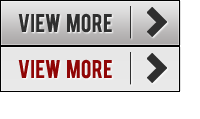
<style>
.page{position:relative;width:200px;height:119px;background:#ffffff}
.page>*{position:absolute;margin:0}
.t1{font:20px "Bebas";color:#2f2f2f}
.t2{font:20px "Bebas";color:#900606}
</style>
<div class="page">
<p class="t1" style="left:18px;top:13px;width:94px;height:20px">view   more</p>
<p class="t2" style="left:18px;top:59px;width:94px;height:20px">view   more</p>
</div>
